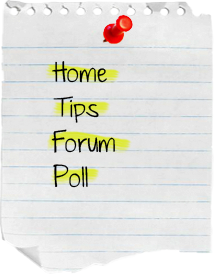
<style>
.page{position:relative;width:216px;height:275px}
.page>*{position:absolute;margin:0}
.t1{font:24px/35px "JustTheWayYouAre";color:#000000}
</style>
<div class="page">
<p class="t1" style="left:51px;top:61px;width:64px;height:127px">Home  <br>Tips   <br>Forum <br>Poll</p>
</div>
